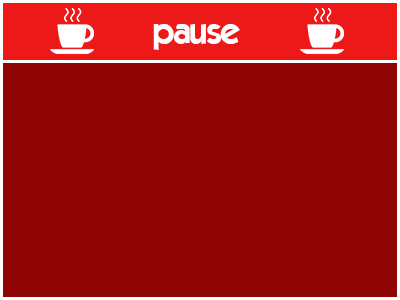
<style>
.page{position:relative;width:400px;height:300px;background:#8f0404}
.page>*{position:absolute;margin:0}
.t1{font:36px "ELEGANCE";color:#ffffff}
</style>
<div class="page">
<p class="t1" style="left:153px;top:24px;width:87px;height:26px">pause</p>
</div>
